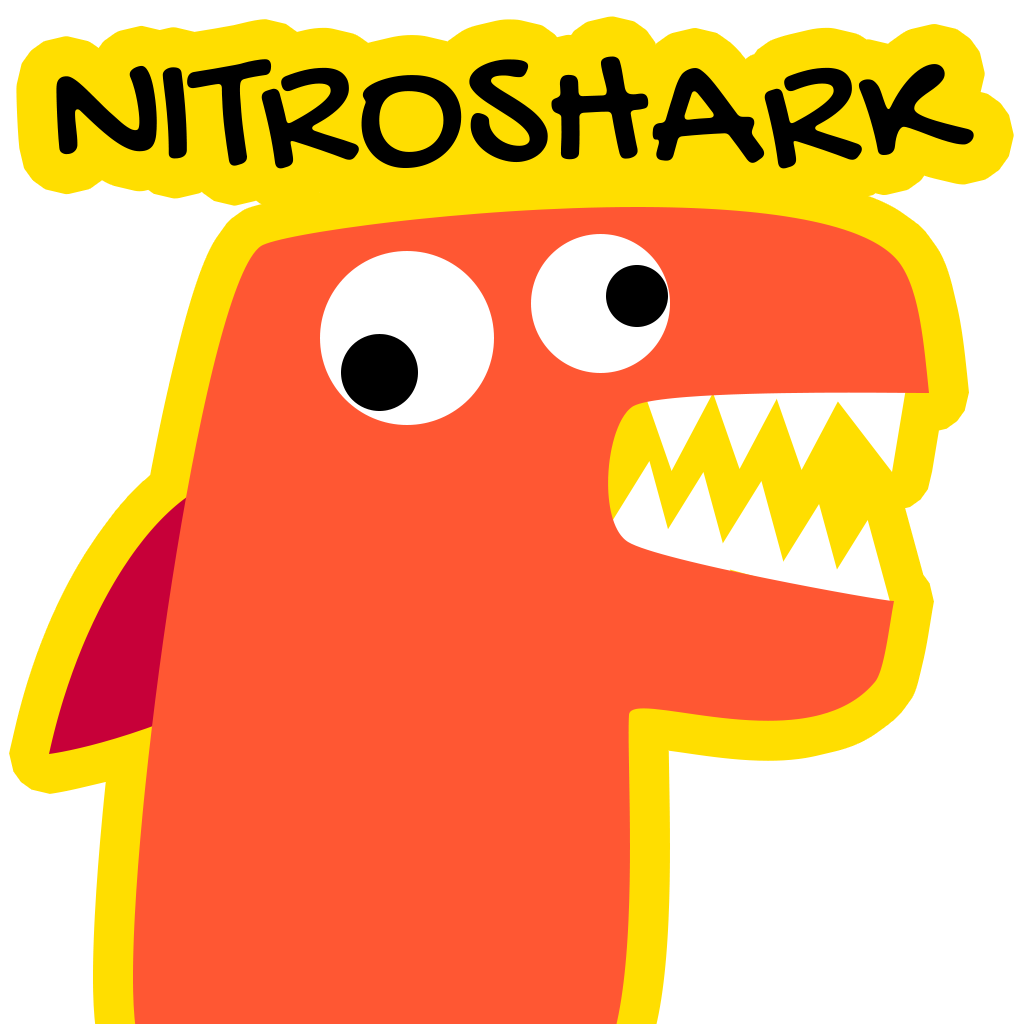
<style>
.page{position:relative;width:1024px;height:1024px;background:#ff5733}
.page>*{position:absolute;margin:0}
.t1{font:180px "GochiHandCyrillic";color:#000000}
</style>
<div class="page">
<p class="t1" style="left:56px;top:56px;width:918px;height:113px">NITROSHARK</p>
</div>
